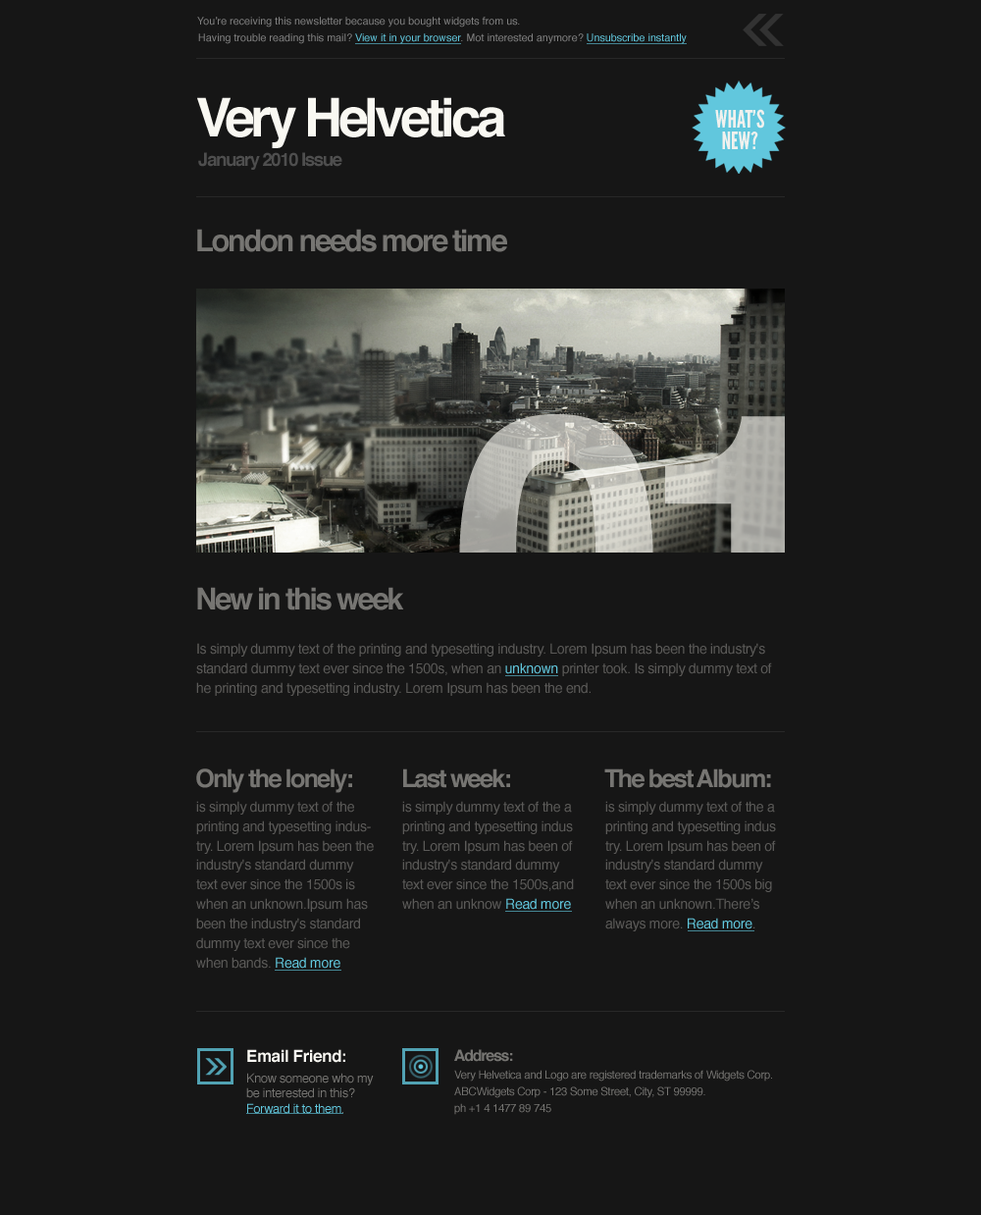
<style>
.page{position:relative;width:981px;height:1215px;background:#161616}
.page>*{position:absolute;margin:0}
.t1{font:10.6px "Helvetica";color:#808080}
.t2{font:10.6px "Helvetica";color:#61c7dd}
.t3{font:53.4px "Helvetica-Bold";letter-spacing:-0.075em;color:#f9f8f2}
.t4{font:18.3px "Helvetica-Bold";letter-spacing:-0.075em;color:#4e4e4e}
.t5{font:30.3px "Helvetica-Bold";letter-spacing:-0.075em;color:#767572}
.t6{font:13.9px/19.5px "Helvetica";letter-spacing:-0.025em;color:#5b5a58}
.t7{font:13.9px/19.5px "Helvetica";letter-spacing:-0.025em;color:#61c7dd}
.t8{font:25px "Helvetica-Bold";letter-spacing:-0.075em;color:#767572}
.t9{font:16.7px "Helvetica-Bold";letter-spacing:-0.025em;color:#f9f8f2}
.t10{font:15.6px "Helvetica-Bold";letter-spacing:-0.075em;color:#767572}
.t11{font:12.5px/15px "Helvetica";letter-spacing:-0.025em;color:#767572}
.t12{font:12.5px/15px "Helvetica";letter-spacing:-0.025em;color:#61c7dd}
.t13{font:11.1px/16.7px "Helvetica";letter-spacing:-0.025em;color:#767572}
</style>
<div class="page">
<p class="t1" style="left:197px;top:17px;width:323px;height:10px">You’re receiving this newsletter because you bought widgets from us.</p>
<p class="t1" style="left:198px;top:33px;width:489px;height:11px">Having trouble reading this mail? <span class="t2">View it in your browser</span>. Mot interested anymore? <span class="t2">Unsubscribe instantly</span></p>
<p class="t3" style="left:197px;top:97px;width:308px;height:51px">Very Helvetica</p>
<p class="t4" style="left:198px;top:152px;width:145px;height:18px">January 2010 Issue</p>
<p class="t5" style="left:197px;top:229px;width:310px;height:23px">London needs more time</p>
<p class="t5" style="left:197px;top:587px;width:207px;height:23px">New in this week</p>
<p class="t6" style="left:196px;top:643px;width:576px;height:53px">Is simply dummy text of the printing and typesetting industry. Lorem Ipsum has been the industry's<br>standard dummy text ever since the 1500s, when an <span class="t7">unknown </span>printer took. Is simply dummy text of <br>he printing and typesetting industry. Lorem Ipsum has been the end.</p>
<p class="t8" style="left:196px;top:768px;width:156px;height:25px">Only the lonely:</p>
<p class="t8" style="left:403px;top:768px;width:107px;height:20px">Last week:</p>
<p class="t8" style="left:605px;top:768px;width:166px;height:20px">The best Album:</p>
<p class="t6" style="left:196px;top:801px;width:178px;height:168px">is simply dummy text of the<br>printing and typesetting indus-<br>try. Lorem Ipsum has been the<br>industry's standard dummy<br>text ever since the 1500s is<br>when an unknown.Ipsum has<br>been the industry's standard<br>dummy text ever since the <br>when bands. <span class="t7">Read more</span></p>
<p class="t6" style="left:402px;top:801px;width:172px;height:109px">is simply dummy text of the a<br>printing and typesetting indus<br>try. Lorem Ipsum has been of<br>industry's standard dummy<br>text ever since the 1500s,and<br>when an unknow <span class="t7">Read more</span></p>
<p class="t6" style="left:606px;top:801px;width:170px;height:130px">is simply dummy text of the a<br>printing and typesetting indus<br>try. Lorem Ipsum has been of<br>industry's standard dummy<br>text ever since the 1500s big<br>when an unknown.There’s<br>always more. <span class="t7">Read more</span>.</p>
<p class="t9" style="left:247px;top:1049px;width:98px;height:14px">Email Friend:</p>
<p class="t10" style="left:454px;top:1049px;width:59px;height:13px">Address:</p>
<p class="t11" style="left:246px;top:1073px;width:128px;height:41px">Know someone who my<br>be interested in this?<br><span class="t12">Forward it to them</span>.</p>
<p class="t13" style="left:454px;top:1070px;width:318px;height:45px">Very Helvetica and Logo are registered trademarks of Widgets Corp.<br>ABCWidgets Corp - 123 Some Street, City, ST 99999. <br>ph +1 4 1477 89 745</p>
</div>
